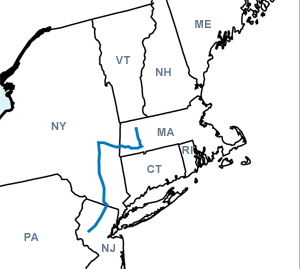
<style>
.page{position:relative;width:300px;height:269px;background:#ffffff}
.page>*{position:absolute;margin:0}
.t1{font:10.9px "Arial-BoldMT";letter-spacing:0.05em;color:#627990}
</style>
<div class="page">
<p class="t1" style="left:195px;top:20px;width:16px;height:8px">ME</p>
<p class="t1" style="left:115px;top:56px;width:15px;height:8px">VT</p>
<p class="t1" style="left:156px;top:68px;width:15px;height:8px">NH</p>
<p class="t1" style="left:51px;top:122px;width:16px;height:8px">NY</p>
<p class="t1" style="left:157px;top:128px;width:18px;height:8px">MA</p>
<p class="t1" style="left:182px;top:146px;width:11px;height:8px">RI</p>
<p class="t1" style="left:147px;top:165px;width:15px;height:8px">CT</p>
<p class="t1" style="left:24px;top:233px;width:15px;height:8px">PA</p>
<p class="t1" style="left:102px;top:244px;width:13px;height:8px">NJ</p>
</div>
